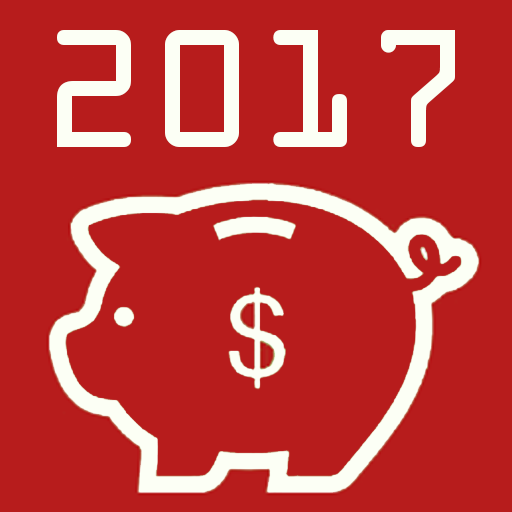
<style>
.page{position:relative;width:512px;height:512px;background:#b71c1c}
.page>*{position:absolute;margin:0}
.t1{font:150px "OCRAStd";color:#fcfff5}
</style>
<div class="page">
<p class="t1" style="left:57px;top:30px;width:398px;height:117px">2017</p>
</div>
